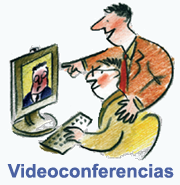
<style>
.page{position:relative;width:180px;height:185px;background:#f7fafb}
.page>*{position:absolute;margin:0}
.t1{font:18.8px "Arial-BoldMT";color:#4a61a2}
</style>
<div class="page">
<p class="t1" style="left:7px;top:163px;width:167px;height:15px">Videoconferencias</p>
</div>
